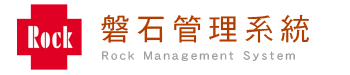
<style>
.page{position:relative;width:350px;height:75px;background:#ffffff}
.page>*{position:absolute;margin:0}
.t1{font:30px "DFHei-Md-HKSCSP-U";letter-spacing:0.2em;color:#b13e00}
.t2{font:13px "DFHei-Md-HKSCSP-U";letter-spacing:0.2em;color:#999999}
</style>
<div class="page">
<p class="t1" style="left:101px;top:14px;width:208px;height:29px">磐石管理系統</p>
<p class="t2" style="left:102px;top:51px;width:193px;height:10px">Rock Management System</p>
</div>
